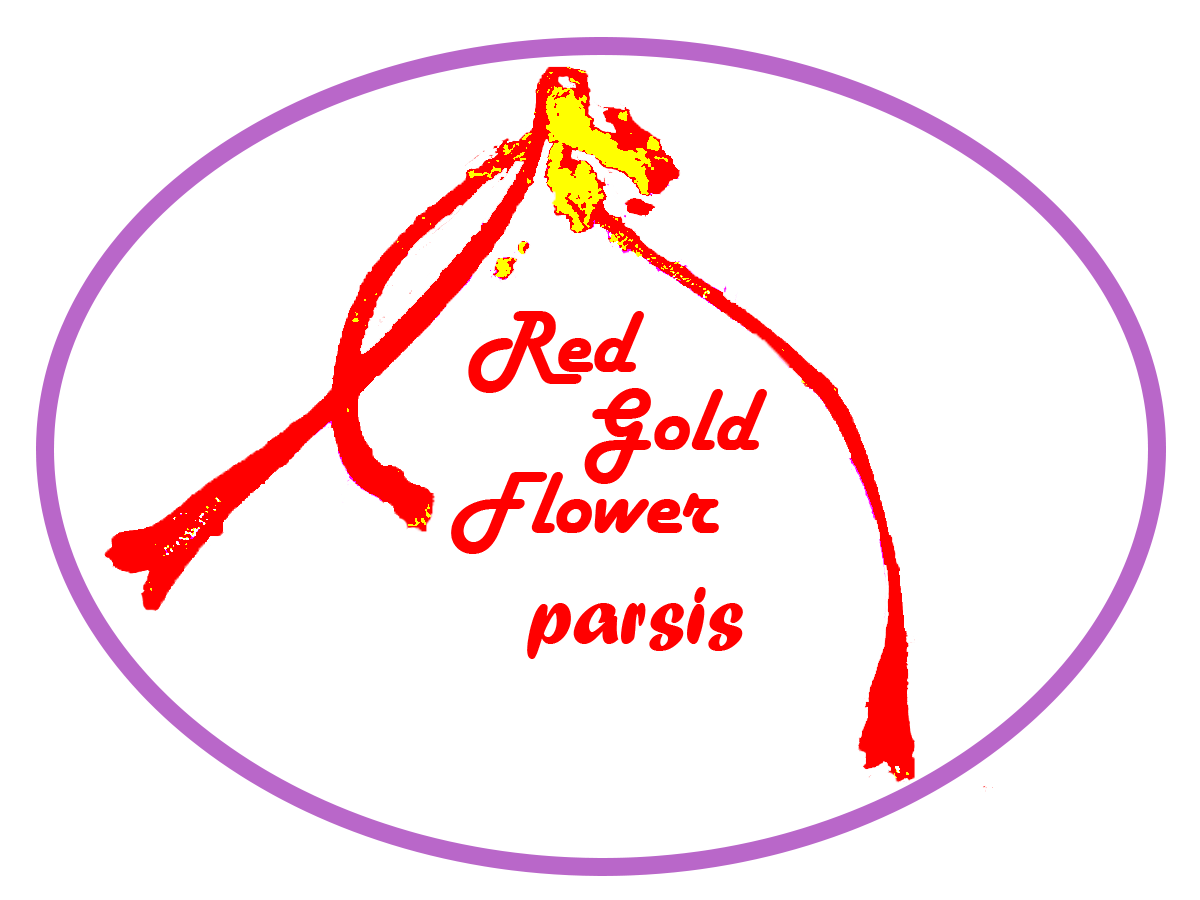
<style>
.page{position:relative;width:1200px;height:900px;background:#ffffff}
.page>*{position:absolute;margin:0}
.t1{font:92px "HarlowSolid";color:#ff0000}
.t2{font:85px "ForteMT";color:#ff0000}
</style>
<div class="page">
<p class="t1" style="left:468px;top:311px;width:176px;height:82px">Red</p>
<p class="t1" style="left:584px;top:388px;width:183px;height:96px">Gold</p>
<p class="t1" style="left:451px;top:472px;width:268px;height:82px">Flower</p>
<p class="t2" style="left:527px;top:587px;width:216px;height:72px">parsis</p>
</div>
